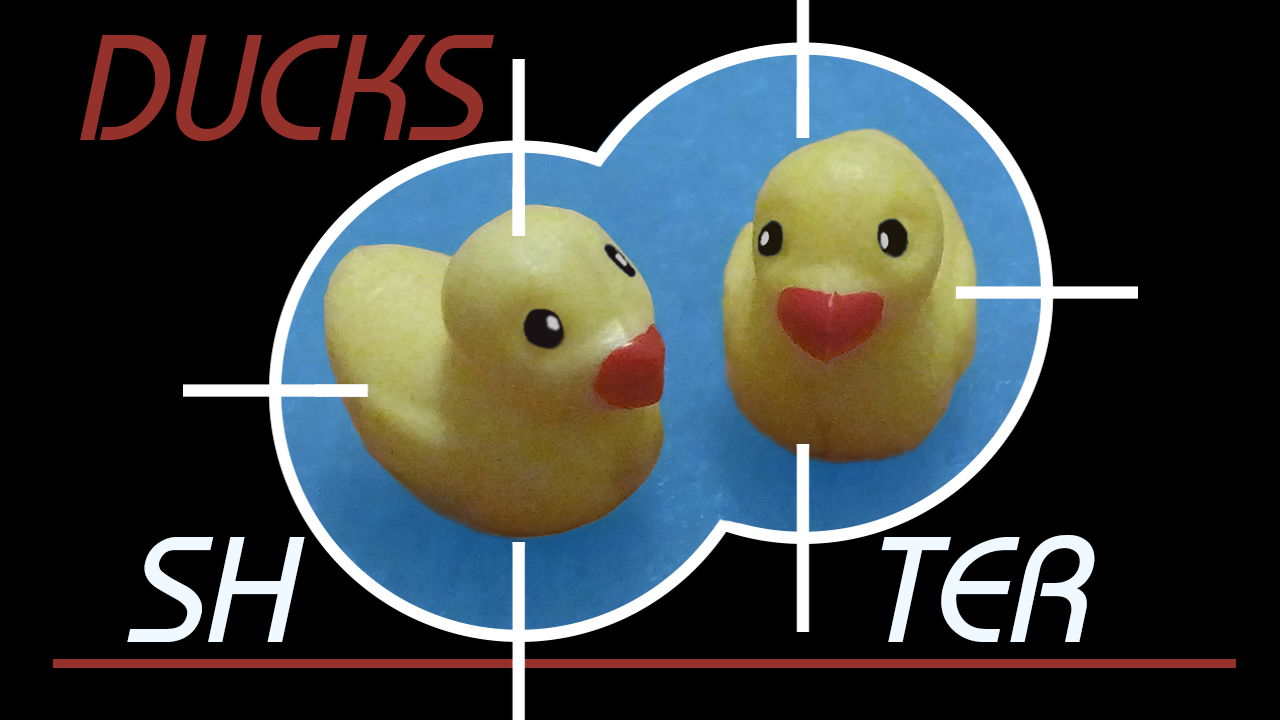
<style>
.page{position:relative;width:1280px;height:720px;background:#000000}
.page>*{position:absolute;margin:0}
.t1{font:150px "BiminiItalic";color:#95312b}
.t2{font:150px "BiminiItalic";color:#f0f9ff}
</style>
<div class="page">
<p class="t1" style="left:80px;top:35px;width:415px;height:106px">DUCKS</p>
<p class="t2" style="left:127px;top:537px;width:178px;height:105px">SH</p>
<p class="t2" style="left:881px;top:535px;width:214px;height:107px">TER</p>
</div>
